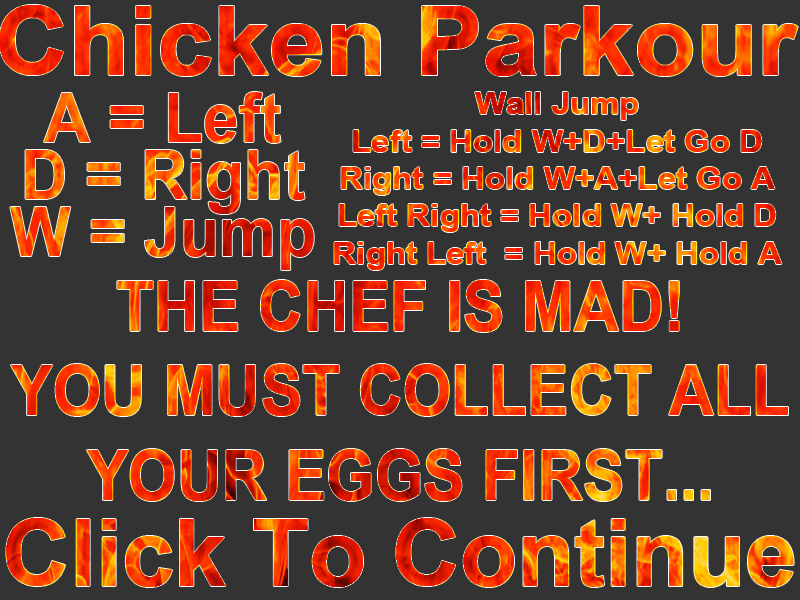
<style>
.page{position:relative;width:800px;height:600px;background:#333333}
.page>*{position:absolute;margin:0}
.t1{font:96.4px "Arial-BoldMT";scale:1.05 1}
.t2{font:68px/56.8px "Arial-BoldMT";scale:0.95 1}
.t3{font:31.1px "Arial-BoldMT";scale:1.06 1}
.t4{font:70.5px "Arial-BoldMT";scale:0.88 1}
.t5{font:93.3px "Arial-BoldMT"}
</style>
<div class="page">
<p class="t1" style="left:0px;top:5px;width:798px;height:71px">Chicken Parkour</p>
<p class="t2" style="left:10px;top:92px;width:304px;height:178px;text-align:center">A = Left<br>D = Right<br>W = Jump</p>
<p class="t3" style="left:334px;top:92px;width:448px;height:178px;text-align:center">Wall Jump<br>Left = Hold W+D+Let Go D<br>Right = Hold W+A+Let Go A<br>Left Right = Hold W+ Hold D<br>Right Left  = Hold W+ Hold A</p>
<p class="t4" style="left:11px;top:280px;width:777px;height:221px;text-align:center">THE CHEF IS MAD!<br>YOU MUST COLLECT ALL<br>YOUR EGGS FIRST...</p>
<p class="t5" style="left:6px;top:518px;width:788px;height:69px">Click To Continue</p>
</div>
